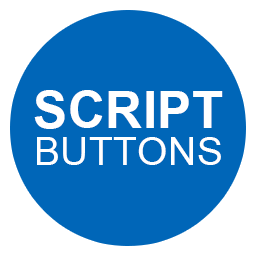
<style>
.page{position:relative;width:256px;height:256px;background:#0066b8}
.page>*{position:absolute;margin:0}
.t1{font:39.3px/37.6px "ArialMT";letter-spacing:0.01em;color:#ffffff}
.t2{font:51.2px "Arial-BoldMT";letter-spacing:0.01em;color:#ffffff}
</style>
<div class="page">
<p class="t1" style="left:34px;top:90px;width:189px;height:75px;text-align:center"><span class="t2">SCRIPT<br></span>BUTTONS</p>
</div>
